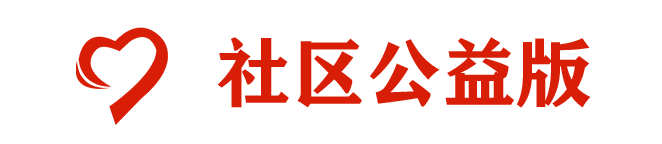
<style>
.page{position:relative;width:662px;height:144px;background:#ffffff}
.page>*{position:absolute;margin:0}
.t1{font:75px "FZCHSJW--GB1-0";color:#d81e06}
</style>
<div class="page">
<p class="t1" style="left:217px;top:37px;width:374px;height:71px">社区公益版</p>
</div>
